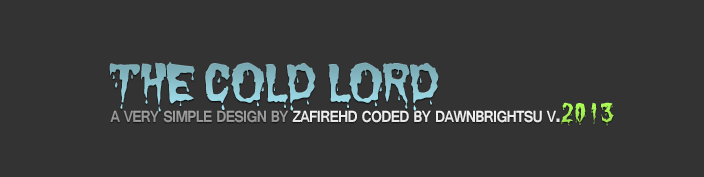
<style>
.page{position:relative;width:704px;height:177px;background:#333333}
.page>*{position:absolute;margin:0}
.t1{font:48.3px "Dracula";letter-spacing:-0.025em;color:#86bac4;font-variant:small-caps}
.t2{font:28.6px "Tunga-Bold";letter-spacing:-0.05em;color:#ffffff;font-variant:small-caps;scale:0.9 1}
.t3{font:28.6px "Tunga-Bold";letter-spacing:-0.05em;color:#a2a2a2;font-variant:small-caps;scale:0.9 1}
.t4{font:24px "Dracula";letter-spacing:-0.05em;color:#adff54;font-variant:small-caps;scale:0.9 1}
</style>
<div class="page">
<p class="t1" style="left:109px;top:62px;width:330px;height:50px">THE COLD LORD</p>
<p class="t2" style="left:110px;top:102px;width:504px;height:24px"><span class="t3">a very simple design by </span>zafirehd coded by dawnbrightsu v.<span class="t4">2013</span></p>
</div>
